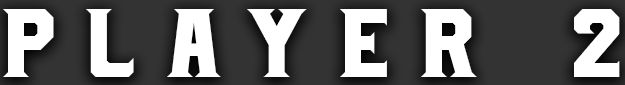
<style>
.page{position:relative;width:625px;height:85px;background:#333333}
.page>*{position:absolute;margin:0}
.t1{font:97px "COMPANYRegular";letter-spacing:0.3em;color:#ffffff}
</style>
<div class="page">
<p class="t1" style="left:3px;top:9px;width:617px;height:68px">PLAYER 2</p>
</div>
